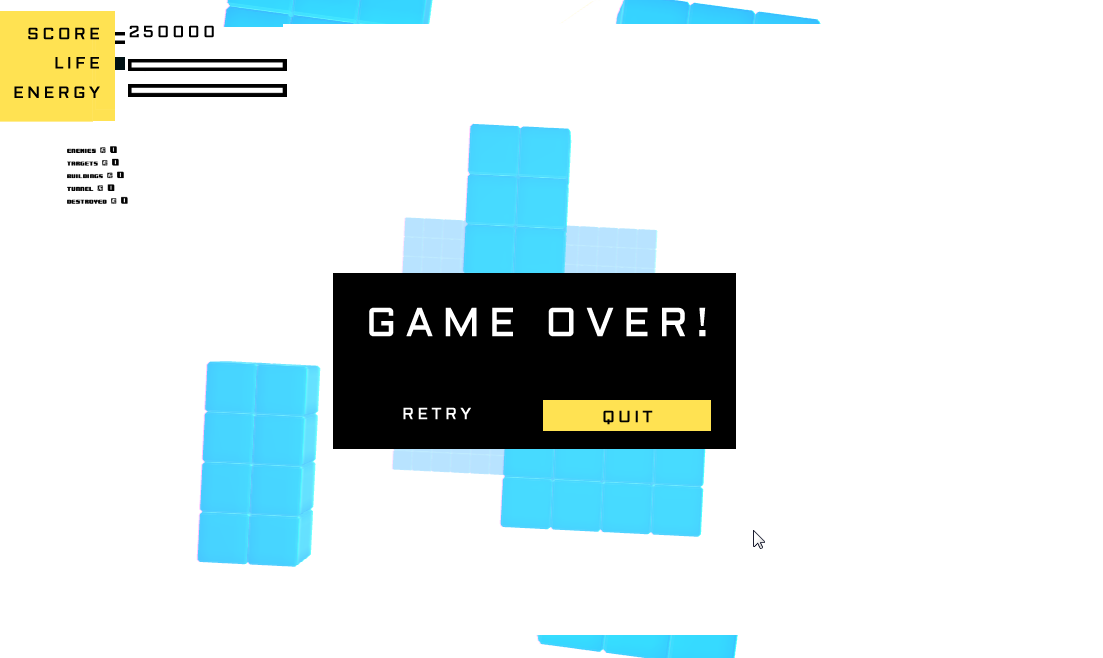
<style>
.page{position:relative;width:1103px;height:658px;background:#ffffff}
.page>*{position:absolute;margin:0}
.t1{font:16px/29.3px "Aldrich";letter-spacing:0.2em;color:#000000;font-weight:bold}
.t2{font:16px "Aldrich";letter-spacing:0.2em;color:#000000;font-weight:bold}
.t3{font:40px "Aldrich";letter-spacing:0.2em;color:#fefefe;font-weight:bold}
.t4{font:16px "Aldrich";letter-spacing:0.2em;color:#ffffff;font-weight:bold}
</style>
<div class="page">
<p class="t1" style="left:14px;top:27px;width:86px;height:71px;text-align:right">SCORE<br>LIFE<br>ENERGY</p>
<p class="t2" style="left:129px;top:25px;width:85px;height:13px">250000</p>
<p class="t3" style="left:369px;top:307px;width:337px;height:30px">GAME OVER!</p>
<p class="t4" style="left:403px;top:407px;width:68px;height:13px">RETRY</p>
<p class="t2" style="left:603px;top:410px;width:50px;height:15px">QUIT</p>
</div>
